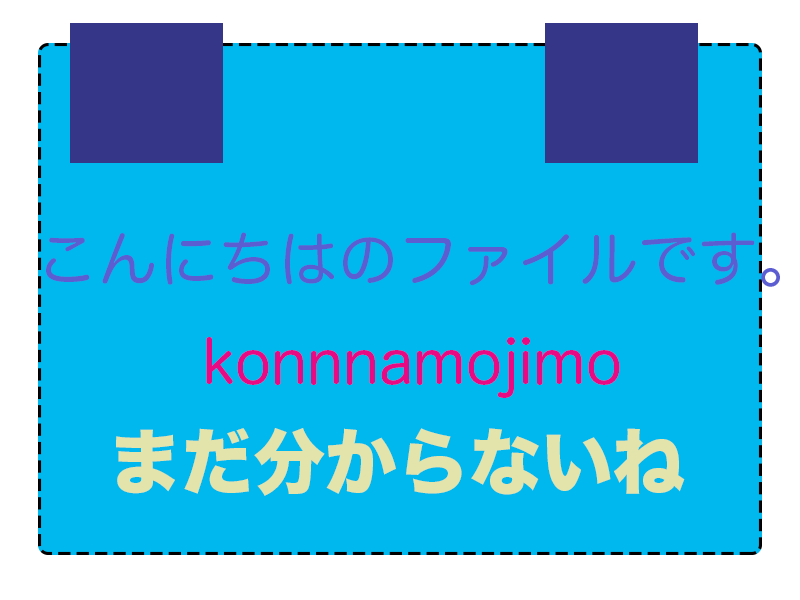
<style>
.page{position:relative;width:800px;height:600px;background:#00b7ee}
.page>*{position:absolute;margin:0}
.t1{font:60px "HiraMaruProN-W4";color:#5d5dd2}
.t2{font:60px "HiraMaruProN-W4";color:#e90a83}
.t3{font:72px "HiraKakuStd-W8";color:#e2e4ab}
</style>
<div class="page">
<p class="t1" style="left:46px;top:232px;width:734px;height:55px">こんにちはのファイルです。</p>
<p class="t2" style="left:206px;top:337px;width:414px;height:61px">konnnamojimo</p>
<p class="t3" style="left:116px;top:428px;width:569px;height:68px">まだ分からないね</p>
</div>
